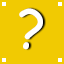
<style>
.page{position:relative;width:64px;height:64px;background:#f1ca02}
.page>*{position:absolute;margin:0}
.t1{font:53.7px "ComicSansMS";color:#ffffff}
</style>
<div class="page">
<p class="t1" style="left:19px;top:8px;width:24px;height:42px">?</p>
</div>
